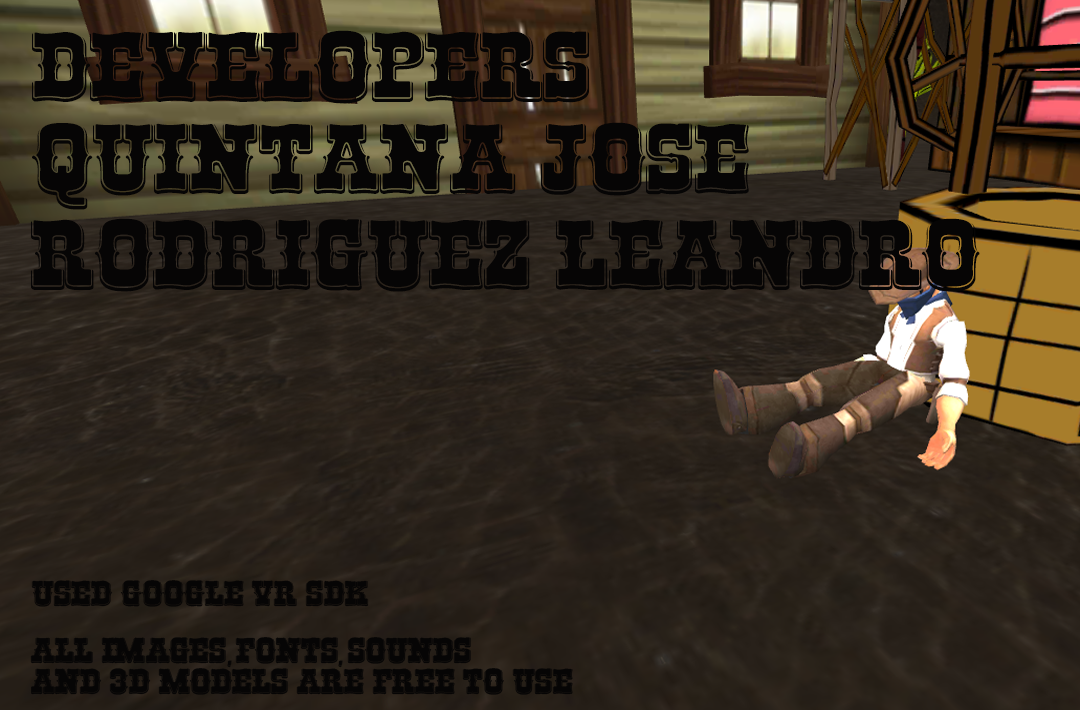
<style>
.page{position:relative;width:1080px;height:710px}
.page>*{position:absolute;margin:0}
.t1{font:100px "RioGrande-Bold";color:#060505}
.t2{font:36px "RioGrande-Bold";color:#060505}
</style>
<div class="page">
<p class="t1" style="left:32px;top:30px;width:557px;height:74px">Developers</p>
<p class="t1" style="left:32px;top:122px;width:717px;height:88px">quintana jose</p>
<p class="t1" style="left:31px;top:218px;width:949px;height:74px">rodriguez leandro</p>
<p class="t2" style="left:31px;top:580px;width:338px;height:27px">USED google VR SDK</p>
</div>
